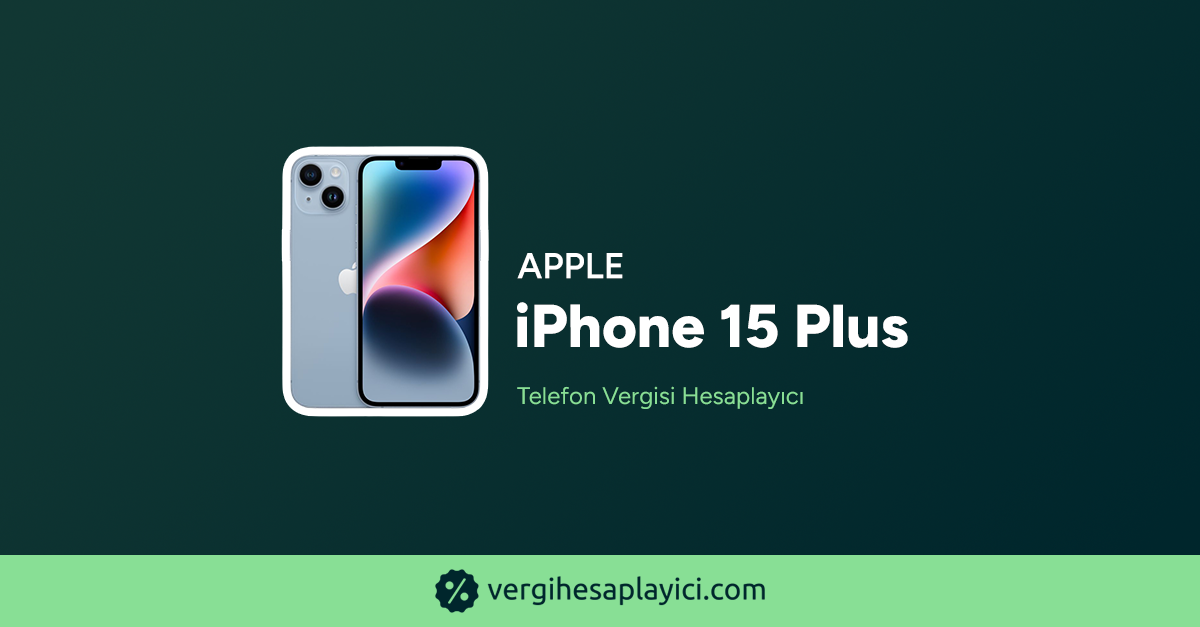
<style>
.page{position:relative;width:1200px;height:627px}
.page>*{position:absolute;margin:0}
.t1{font:36px "Figtree-SemiBold";color:#ffffff;text-transform:uppercase;font-weight:bold}
.t2{font:60.3px "Figtree-ExtraBold";color:#ffffff;font-weight:bold}
.t3{font:24px "Figtree-Regular";color:#88df95;font-weight:bold}
</style>
<div class="page">
<p class="t1" style="left:517px;top:253px;width:106px;height:26px">Apple</p>
<p class="t2" style="left:517px;top:302px;width:391px;height:46px">iPhone 15 Plus</p>
<p class="t3" style="left:517px;top:386px;width:286px;height:23px">Telefon Vergisi Hesaplayıcı</p>
</div>
